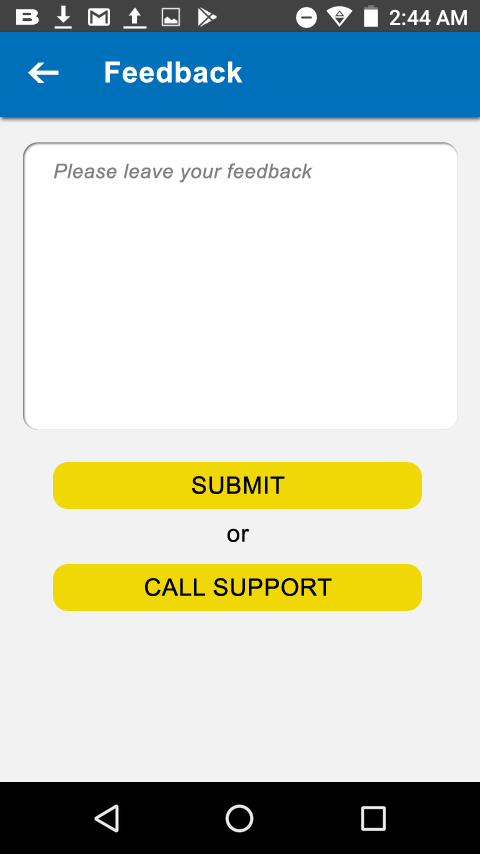
<style>
.page{position:relative;width:480px;height:854px;background:#f2f2f2}
.page>*{position:absolute;margin:0}
.t1{font:29px "Arial-BoldMT";letter-spacing:0.025em;color:#ffffff}
.t2{font:20px "Arial-ItalicMT";letter-spacing:0.025em;color:#7f7f7f}
.t3{font:24px "ArialMT";letter-spacing:0.025em;color:#000000}
</style>
<div class="page">
<p class="t1" style="left:105px;top:61px;width:138px;height:22px">Feedback</p>
<p class="t2" style="left:54px;top:163px;width:259px;height:20px">Please leave your feedback</p>
<p class="t3" style="left:192px;top:476px;width:93px;height:18px">SUBMIT</p>
<p class="t3" style="left:227px;top:528px;width:23px;height:14px">or</p>
<p class="t3" style="left:145px;top:578px;width:187px;height:18px">CALL SUPPORT</p>
</div>
